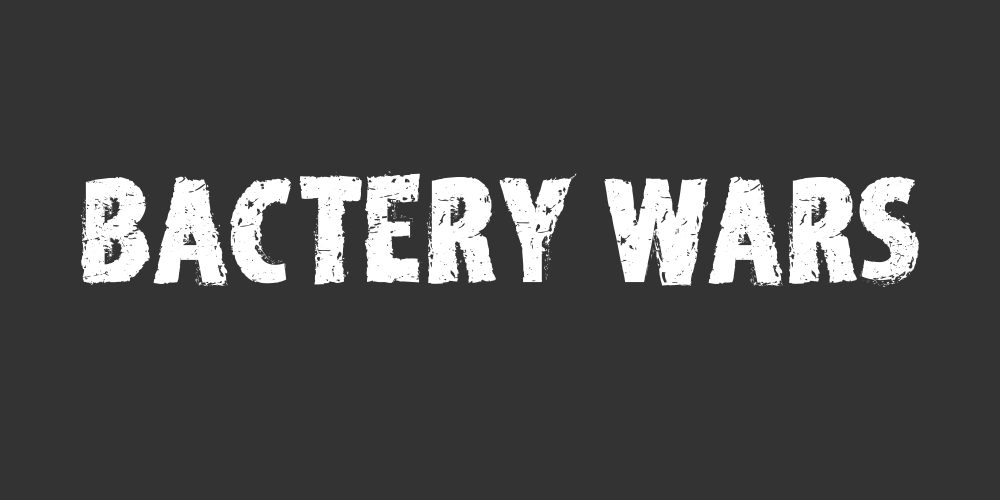
<style>
.page{position:relative;width:1000px;height:500px;background:#333333}
.page>*{position:absolute;margin:0}
.t1{font:173px "Edirne-Normal";color:#ffffff}
</style>
<div class="page">
<p class="t1" style="left:80px;top:171px;width:839px;height:116px">BACTERY WARS</p>
</div>
